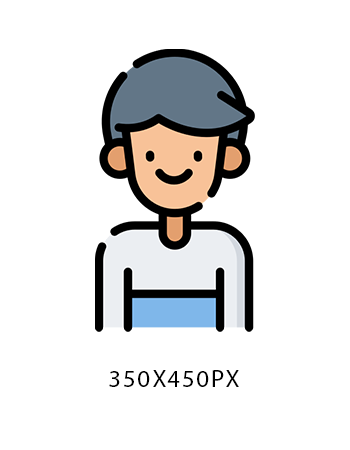
<style>
.page{position:relative;width:350px;height:450px;background:#ffffff}
.page>*{position:absolute;margin:0}
.t1{font:24.8px "MyriadPro-Regular";letter-spacing:0.07em;color:#000000;text-transform:uppercase}
</style>
<div class="page">
<p class="t1" style="left:109px;top:370px;width:130px;height:17px">350x450Px</p>
</div>
